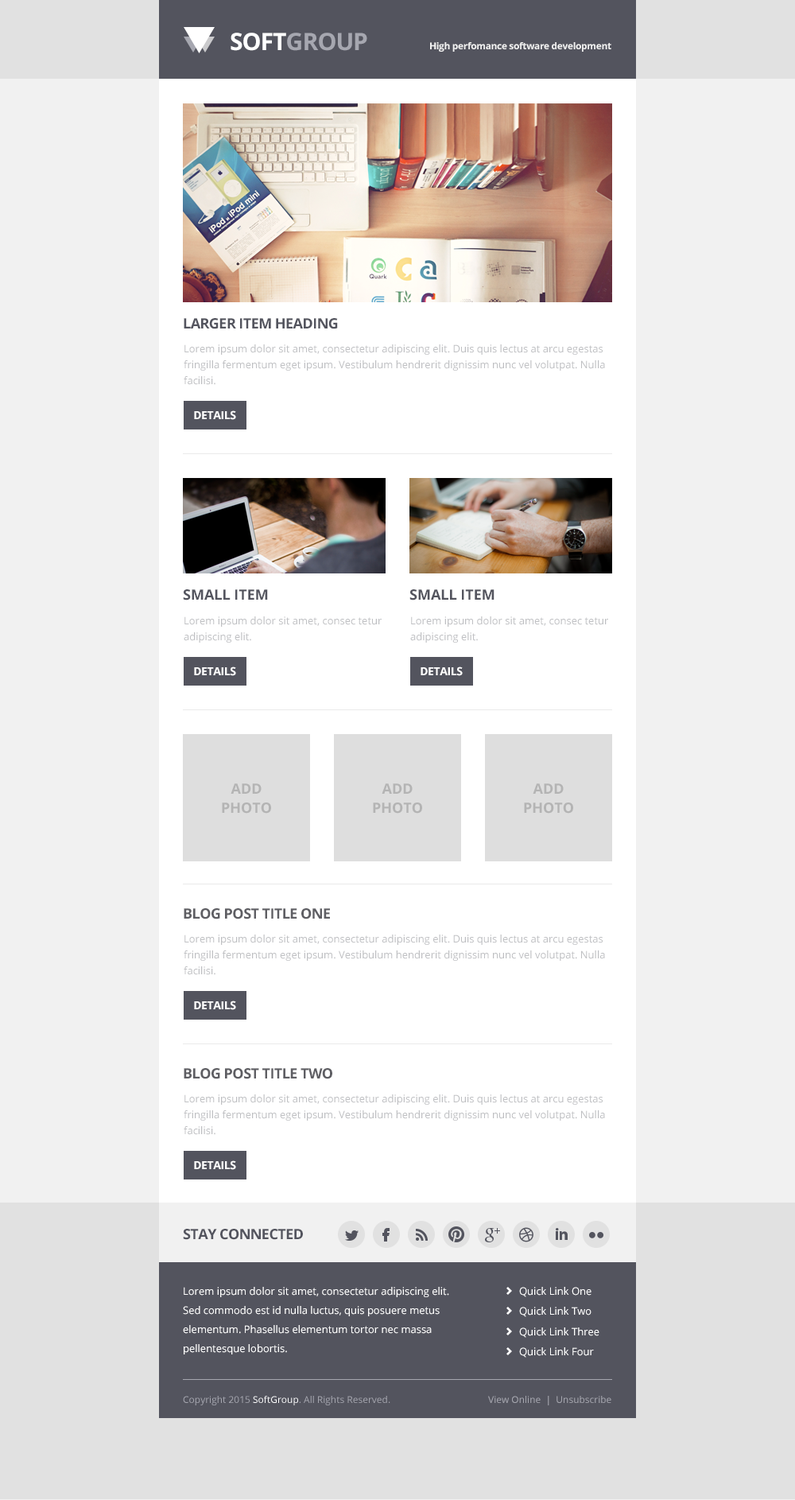
<style>
.page{position:relative;width:795px;height:1500px;background:#f1f1f1}
.page>*{position:absolute;margin:0}
.t1{font:23.9px "OpenSans-Bold";letter-spacing:-0.03em;color:#a6a7b0;text-transform:uppercase}
.t2{font:23.9px "OpenSans-Bold";letter-spacing:-0.03em;color:#ffffff;text-transform:uppercase}
.t3{font:9.5px "OpenSans-Bold";letter-spacing:-0.03em;color:#f1f1f1}
.t4{font:14.3px "OpenSans-Bold";letter-spacing:-0.03em;color:#53545e;text-transform:uppercase}
.t5{font:10.3px/15.9px "OpenSans";color:#bfc0c3}
.t6{font:11.1px "OpenSans-Bold";letter-spacing:-0.03em;color:#ffffff;text-transform:uppercase}
.t7{font:14.3px "OpenSans-Bold";color:#53545e;text-transform:uppercase}
.t8{font:14.3px/19.1px "OpenSans-Bold";color:#b4b4b4}
.t9{font:14.3px "OpenSans-Bold";letter-spacing:-0.03em;color:#5e5e63;text-transform:uppercase}
.t10{font:10.3px/19.1px "OpenSans";color:#ffffff}
.t11{font:10.3px "OpenSans";color:#ffffff}
.t12{font:9.5px "OpenSans";color:#a6a7b0}
</style>
<div class="page">
<p class="t1" style="left:231px;top:33px;width:136px;height:18px"><span class="t2">SOFT</span>GROUP</p>
<p class="t3" style="left:430px;top:42px;width:181px;height:10px">High perfomance software development</p>
<p class="t4" style="left:184px;top:318px;width:154px;height:11px">Larger Item Heading</p>
<p class="t5" style="left:184px;top:344px;width:421px;height:41px">Lorem ipsum dolor sit amet, consectetur adipiscing elit. Duis quis lectus at arcu egestas fringilla fermentum eget ipsum. Vestibulum hendrerit dignissim nunc vel volutpat. Nulla facilisi.</p>
<p class="t6" style="left:194px;top:410px;width:42px;height:10px">Details</p>
<p class="t7" style="left:183px;top:589px;width:85px;height:11px">Small Item</p>
<p class="t7" style="left:409px;top:589px;width:86px;height:11px">Small Item</p>
<p class="t5" style="left:184px;top:616px;width:198px;height:26px">Lorem ipsum dolor sit amet, consec tetur adipiscing elit.</p>
<p class="t5" style="left:410px;top:616px;width:198px;height:26px">Lorem ipsum dolor sit amet, consec tetur adipiscing elit.</p>
<p class="t6" style="left:194px;top:666px;width:42px;height:10px">Details</p>
<p class="t6" style="left:421px;top:666px;width:42px;height:10px">Details</p>
<p class="t8" style="left:222px;top:783px;width:49px;height:30px;text-align:center">ADD<br>PHOTO</p>
<p class="t8" style="left:373px;top:783px;width:49px;height:30px;text-align:center">ADD<br>PHOTO</p>
<p class="t8" style="left:524px;top:783px;width:49px;height:30px;text-align:center">ADD<br>PHOTO</p>
<p class="t9" style="left:184px;top:908px;width:146px;height:11px">Blog Post Title One</p>
<p class="t5" style="left:184px;top:934px;width:421px;height:41px">Lorem ipsum dolor sit amet, consectetur adipiscing elit. Duis quis lectus at arcu egestas fringilla fermentum eget ipsum. Vestibulum hendrerit dignissim nunc vel volutpat. Nulla facilisi.</p>
<p class="t6" style="left:194px;top:1000px;width:42px;height:10px">Details</p>
<p class="t9" style="left:184px;top:1068px;width:148px;height:11px">Blog Post Title Two</p>
<p class="t5" style="left:184px;top:1094px;width:421px;height:41px">Lorem ipsum dolor sit amet, consectetur adipiscing elit. Duis quis lectus at arcu egestas fringilla fermentum eget ipsum. Vestibulum hendrerit dignissim nunc vel volutpat. Nulla facilisi.</p>
<p class="t6" style="left:194px;top:1160px;width:42px;height:10px">Details</p>
<p class="t4" style="left:183px;top:1228px;width:120px;height:12px">Stay Connected</p>
<p class="t10" style="left:183px;top:1287px;width:266px;height:67px">Lorem ipsum dolor sit amet, consectetur adipiscing elit. Sed commodo est id nulla luctus, quis posuere metus elementum. Phasellus elementum tortor nec massa pellentesque lobortis.</p>
<p class="t11" style="left:519px;top:1287px;width:73px;height:10px">Quick Link One</p>
<p class="t11" style="left:519px;top:1306px;width:73px;height:11px">Quick Link Two</p>
<p class="t11" style="left:519px;top:1327px;width:81px;height:10px">Quick Link Three</p>
<p class="t11" style="left:519px;top:1347px;width:75px;height:10px">Quick Link Four</p>
<p class="t12" style="left:488px;top:1395px;width:123px;height:10px">View Online  |  Unsubscribe</p>
</div>
